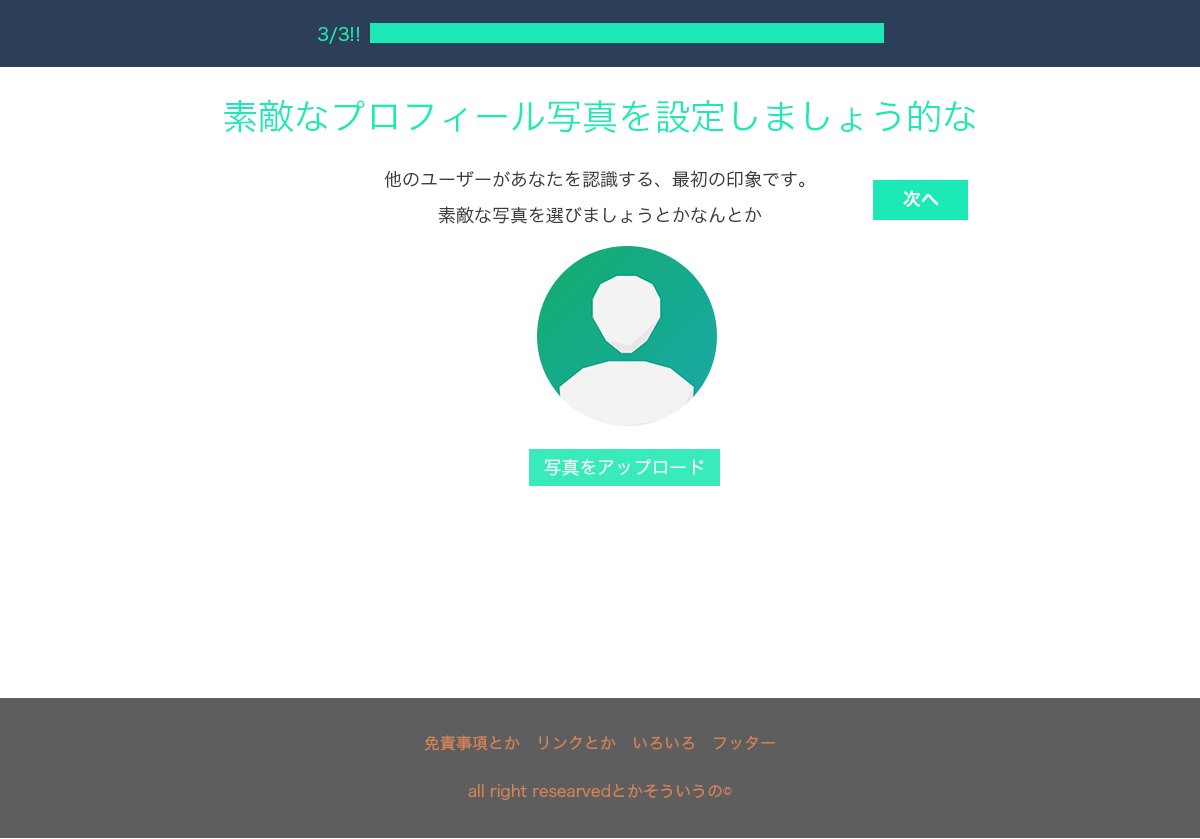
<style>
.page{position:relative;width:1200px;height:839px;background:#ffffff}
.page>*{position:absolute;margin:0}
.t1{font:18px "HiraKakuPro-W3";color:#1de9b6}
.t2{font:36px "HiraKakuPro-W3";color:#1de9b6}
.t3{font:18px/36px "HiraKakuPro-W3";color:#3d3d3d}
.t4{font:18px "HiraKakuPro-W6";color:#ffffff}
.t5{font:18px "HiraKakuPro-W3";color:#ffffff}
.t6{font:16px/48px "HiraKakuPro-W3";color:#d68356}
</style>
<div class="page">
<p class="t1" style="left:318px;top:27px;width:41px;height:17px">3/3!!</p>
<p class="t2" style="left:224px;top:99px;width:751px;height:34px">素敵なプロフィール写真を設定しましょう的な</p>
<p class="t3" style="left:384px;top:170px;width:421px;height:54px;text-align:center">他のユーザーがあなたを認識する、最初の印象です。<br>素敵な写真を選びましょうとかなんとか</p>
<p class="t4" style="left:903px;top:190px;width:36px;height:17px">次へ</p>
<p class="t5" style="left:544px;top:459px;width:160px;height:17px">写真をアップロード</p>
<p class="t6" style="left:425px;top:735px;width:350px;height:65px;text-align:center">免責事項とか　リンクとか　いろいろ　フッター<br>all right researvedとかそういうの©</p>
</div>
